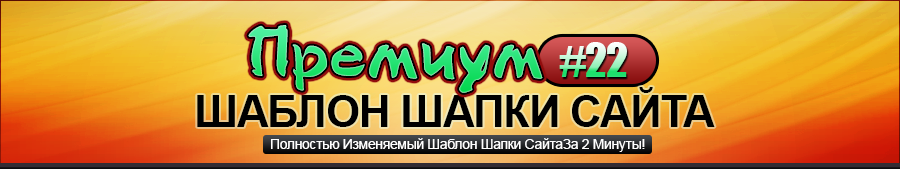
<style>
.page{position:relative;width:900px;height:169px}
.page>*{position:absolute;margin:0}
.t1{font:72px "Stylo-Bold";letter-spacing:0.025em}
.t2{font:44px "Impact";letter-spacing:-0.025em;text-transform:uppercase}
.t3{font:43.7px "Arial-BoldMT";letter-spacing:-0.025em;color:#000000;text-transform:uppercase}
.t4{font:14px "ArialMT";letter-spacing:-0.025em;color:#ffffff}
</style>
<div class="page">
<p class="t1" style="left:248px;top:25px;width:295px;height:68px">Премиум</p>
<p class="t2" style="left:559px;top:42px;width:68px;height:35px">#22</p>
<p class="t3" style="left:197px;top:87px;width:518px;height:40px">Шаблон шапки Сайта</p>
<p class="t4" style="left:271px;top:138px;width:374px;height:14px">Полностью Изменяемый Шаблон Шапки СайтаЗа 2 Минуты!</p>
</div>
